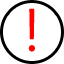
<style>
.page{position:relative;width:64px;height:64px;background:#ffffff}
.page>*{position:absolute;margin:0}
.t1{font:60px "SegoeUISymbol";color:#ff0000;scale:0.95 1}
</style>
<div class="page">
<p class="t1" style="left:28px;top:8px;width:7px;height:44px">!</p>
</div>
